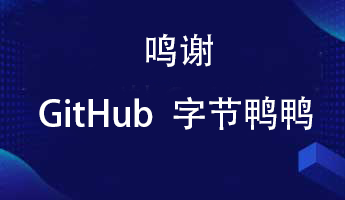
<style>
.page{position:relative;width:345px;height:200px;background:#0c0d50}
.page>*{position:absolute;margin:0}
.t1{font:36px "AdobeHeitiStd-Regular";color:#ffffff}
</style>
<div class="page">
<p class="t1" style="left:39px;top:33px;width:274px;height:98px">鸣谢<br>GitHub  字节鸭鸭</p>
</div>
